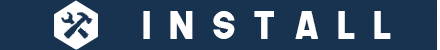
<style>
.page{position:relative;width:440px;height:50px;background:#183350}
.page>*{position:absolute;margin:0}
.t1{font:37.5px "TheNextFont";letter-spacing:0.48em;color:#ffffff}
</style>
<div class="page">
<p class="t1" style="left:143px;top:11px;width:248px;height:28px">INSTALL</p>
</div>
